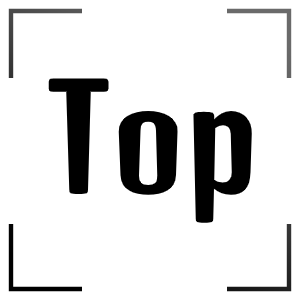
<style>
.page{position:relative;width:300px;height:300px;background:#ffffff}
.page>*{position:absolute;margin:0}
.t1{font:140px "DenkOne-Regular";color:#000000}
</style>
<div class="page">
<p class="t1" style="left:48px;top:78px;width:204px;height:145px">Top</p>
</div>
